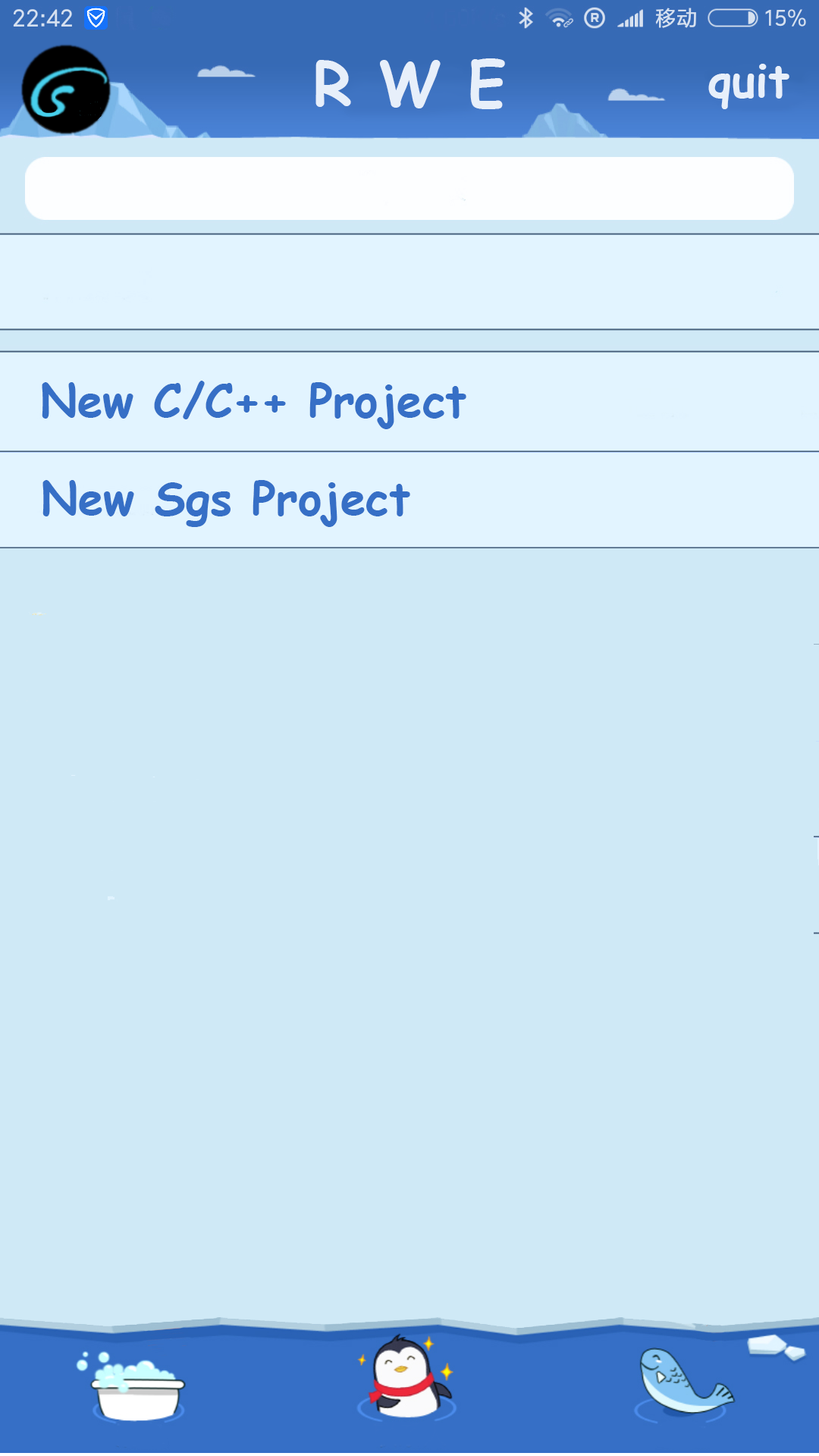
<style>
.page{position:relative;width:819px;height:1456px;background:#cfe9f6}
.page>*{position:absolute;margin:0}
.t1{font:60.7px "ComicSansMS-Bold";color:#e7effa}
.t2{font:45.5px "ComicSansMS-Bold";color:#e7effa}
.t3{font:45.5px "ComicSansMS-Bold";color:#366fc6}
</style>
<div class="page">
<p class="t1" style="left:315px;top:58px;width:190px;height:51px">R W E</p>
<p class="t2" style="left:708px;top:64px;width:81px;height:45px">quit</p>
<p class="t3" style="left:42px;top:381px;width:424px;height:48px">New C/C++ Project</p>
<p class="t3" style="left:42px;top:480px;width:368px;height:47px">New Sgs Project</p>
</div>
